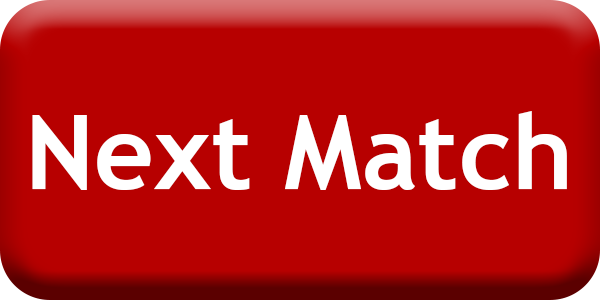
<style>
.page{position:relative;width:600px;height:300px;background:#b70000}
.page>*{position:absolute;margin:0}
.t1{font:104.2px "TrebuchetMS-Bold";color:#ffffff}
</style>
<div class="page">
<p class="t1" style="left:32px;top:111px;width:535px;height:79px">Next Match</p>
</div>
